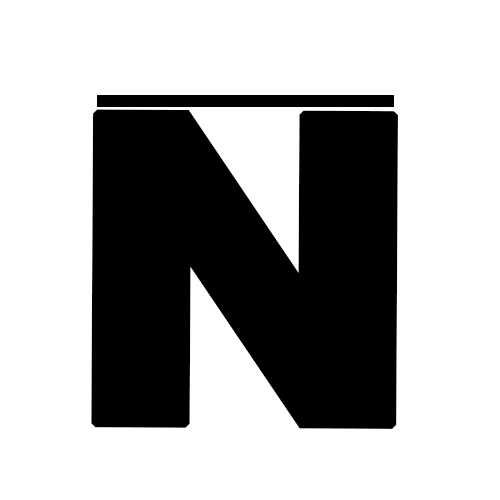
<style>
.page{position:relative;width:500px;height:500px;background:#ffffff}
.page>*{position:absolute;margin:0}
.t1{font:432.5px "Arial-Black";color:#000000;font-weight:bold}
</style>
<div class="page">
<p class="t1" style="left:91px;top:109px;width:307px;height:320px">N</p>
</div>
